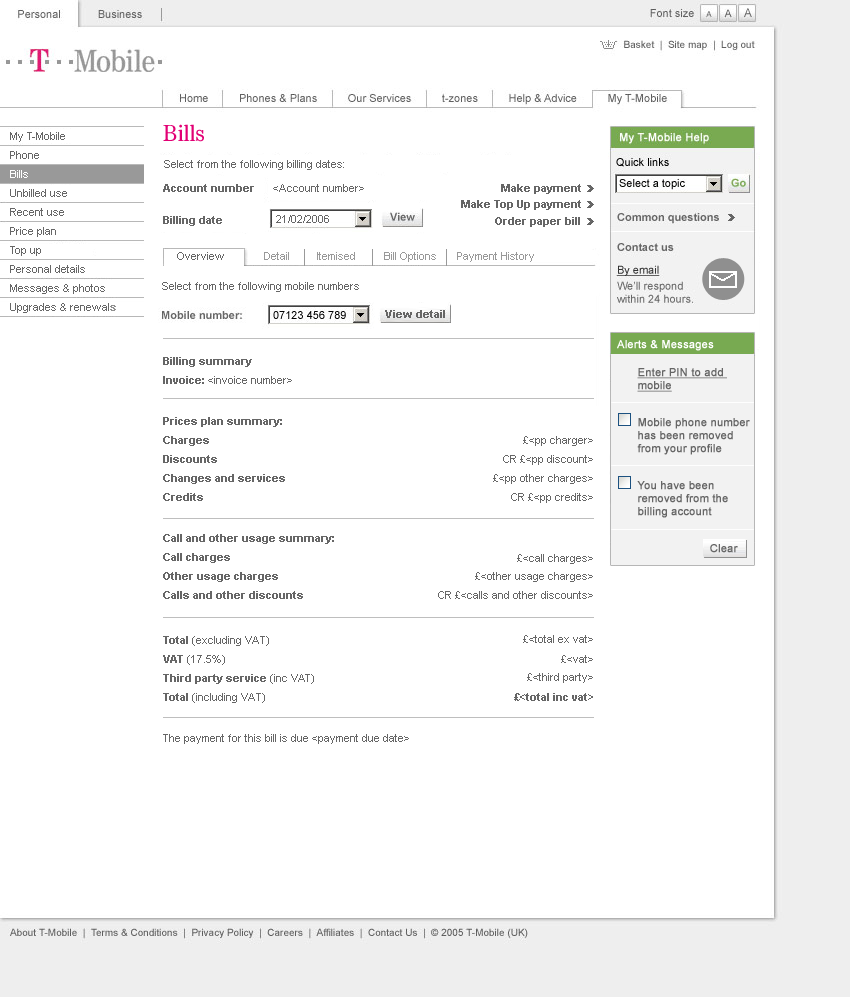
<style>
.page{position:relative;width:850px;height:997px;background:#ffffff}
.page>*{position:absolute;margin:0}
.t1{font:24px "Tele-Antiqua";color:#e20074}
.t2{font:11px/19px "ArialMT";color:#666666}
.t3{font:11px/19px "ArialMT";color:#ffffff}
.t4{font:11px/19px "ArialMT";color:#8f8f8f;font-weight:bold}
.t5{font:11px "ArialMT";color:#666666}
.t6{font:11px "Arial-BoldMT";color:#666666}
.t7{font:11px "ArialMT";color:#999999}
.t8{font:11px "ArialMT";color:#ffffff;font-weight:bold}
.t9{font:11px/19px "Arial-BoldMT";color:#666666}
.t10{font:11px "ArialMT";color:#666666;font-weight:bold;text-decoration:underline}
.t11{font:11px "ArialMT";color:#666666;font-weight:bold}
</style>
<div class="page">
<p class="t1" style="left:163px;top:124px;width:41px;height:18px">Bills</p>
<p class="t2" style="left:10px;top:132px;width:106px;height:181px">My T-Mobile<br>Phone<br><span class="t3">Bills<br></span>Unbilled use<br>Recent use<br>Price plan<br>Top up<br>Personal details<br>Messages &amp; photos<br>Upgrades &amp; renewal<span class="t4">s</span></p>
<p class="t5" style="left:164px;top:160px;width:180px;height:10px">Select from the following billing dates:</p>
<p class="t6" style="left:163px;top:184px;width:91px;height:8px">Account number</p>
<p class="t5" style="left:273px;top:184px;width:91px;height:8px">&lt;Account number&gt;</p>
<p class="t6" style="left:501px;top:184px;width:80px;height:10px">Make payment</p>
<p class="t6" style="left:461px;top:200px;width:120px;height:10px">Make Top Up payment</p>
<p class="t6" style="left:163px;top:216px;width:59px;height:10px">Billing date</p>
<p class="t5" style="left:276px;top:215px;width:53px;height:8px">21/02/2006</p>
<p class="t6" style="left:495px;top:217px;width:85px;height:10px">Order paper bill</p>
<p class="t5" style="left:177px;top:252px;width:47px;height:8px">Overview</p>
<p class="t7" style="left:264px;top:252px;width:25px;height:8px">Detail</p>
<p class="t7" style="left:317px;top:252px;width:38px;height:8px">Itemised</p>
<p class="t7" style="left:384px;top:252px;width:52px;height:10px">Bill Options</p>
<p class="t7" style="left:457px;top:252px;width:77px;height:10px">Payment History</p>
<p class="t5" style="left:162px;top:282px;width:197px;height:10px">Select from the following mobile numbers</p>
<p class="t6" style="left:385px;top:310px;width:60px;height:8px">View detail</p>
<p class="t8" style="left:617px;top:340px;width:97px;height:11px">Alerts &amp; Messages</p>
<p class="t9" style="left:163px;top:357px;width:129px;height:27px">Billing summary<br>Invoice: <span class="t2">&lt;invoice number&gt;</span></p>
<p class="t10" style="left:637px;top:368px;width:90px;height:24px">Enter PIN to add <br>mobile</p>
<p class="t9" style="left:163px;top:417px;width:122px;height:84px">Prices plan summary:<br>Charges<br>Discounts<br>Changes and services<br>Credits</p>
<p class="t11" style="left:637px;top:418px;width:113px;height:37px">Mobile phone number <br>has been removed <br>from your profile</p>
<p class="t5" style="left:523px;top:436px;width:70px;height:10px">£&lt;pp charger&gt;</p>
<p class="t5" style="left:503px;top:455px;width:90px;height:10px">CR £&lt;pp discount&gt;</p>
<p class="t5" style="left:493px;top:474px;width:100px;height:10px">£&lt;pp other charges&gt;</p>
<p class="t11" style="left:637px;top:481px;width:91px;height:37px">You have been <br>removed from the <br>billing account</p>
<p class="t5" style="left:511px;top:493px;width:82px;height:10px">CR £&lt;pp credits&gt;</p>
<p class="t9" style="left:163px;top:534px;width:171px;height:65px">Call and other usage summary:<br>Call charges<br>Other usage charges<br>Calls and other discounts</p>
<p class="t11" style="left:710px;top:544px;width:28px;height:9px">Clear</p>
<p class="t5" style="left:517px;top:554px;width:76px;height:10px">£&lt;call charges&gt;</p>
<p class="t5" style="left:475px;top:572px;width:118px;height:10px">£&lt;other usage charges&gt;</p>
<p class="t5" style="left:438px;top:591px;width:155px;height:8px">CR £&lt;calls and other discounts&gt;</p>
<p class="t9" style="left:163px;top:636px;width:151px;height:67px">Total<span class="t2"> (excluding VAT)<br></span>VAT <span class="t2">(17.5%)<br></span>Third party service <span class="t2">(inc VAT)<br></span>Total <span class="t2">(including VAT)</span></p>
<p class="t5" style="left:523px;top:635px;width:70px;height:8px">£&lt;total ex vat&gt;</p>
<p class="t5" style="left:561px;top:655px;width:32px;height:8px">£&lt;vat&gt;</p>
<p class="t5" style="left:527px;top:673px;width:66px;height:10px">£&lt;third party&gt;</p>
<p class="t6" style="left:514px;top:693px;width:79px;height:8px">£&lt;total inc vat&gt;</p>
<p class="t5" style="left:163px;top:734px;width:246px;height:10px">The payment for this bill is due &lt;payment due date&gt;</p>
</div>
